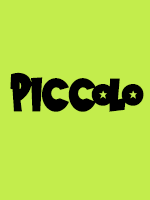
<style>
.page{position:relative;width:150px;height:200px;background:#c3ed4c}
.page>*{position:absolute;margin:0}
.t1{font:55px "SaiyanSans";color:#000000}
</style>
<div class="page">
<p class="t1" style="left:10px;top:72px;width:134px;height:40px">Piccolo</p>
</div>
